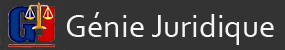
<style>
.page{position:relative;width:285px;height:50px;background:#333333}
.page>*{position:absolute;margin:0}
.t1{font:33px "Corbel";color:#f5f5f5}
</style>
<div class="page">
<p class="t1" style="left:66px;top:12px;width:208px;height:33px">Génie Juridique</p>
</div>
